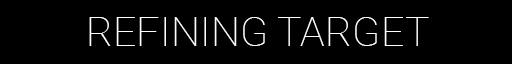
<style>
.page{position:relative;width:512px;height:64px;background:#000000}
.page>*{position:absolute;margin:0}
.t1{font:41.3px "Roboto-Thin";color:#ffffff;text-transform:uppercase}
</style>
<div class="page">
<p class="t1" style="left:89px;top:17px;width:340px;height:29px">REFINING TARGET</p>
</div>
